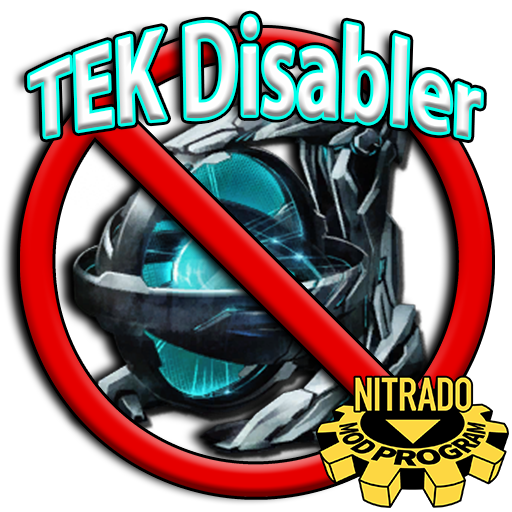
<style>
.page{position:relative;width:512px;height:512px;background:#ffffff}
.page>*{position:absolute;margin:0}
.t1{font:80px "MyriadPro-Bold";color:#fefefe}
</style>
<div class="page">
<p class="t1" style="left:30px;top:16px;width:451px;height:122px">TEK Disabler</p>
</div>
